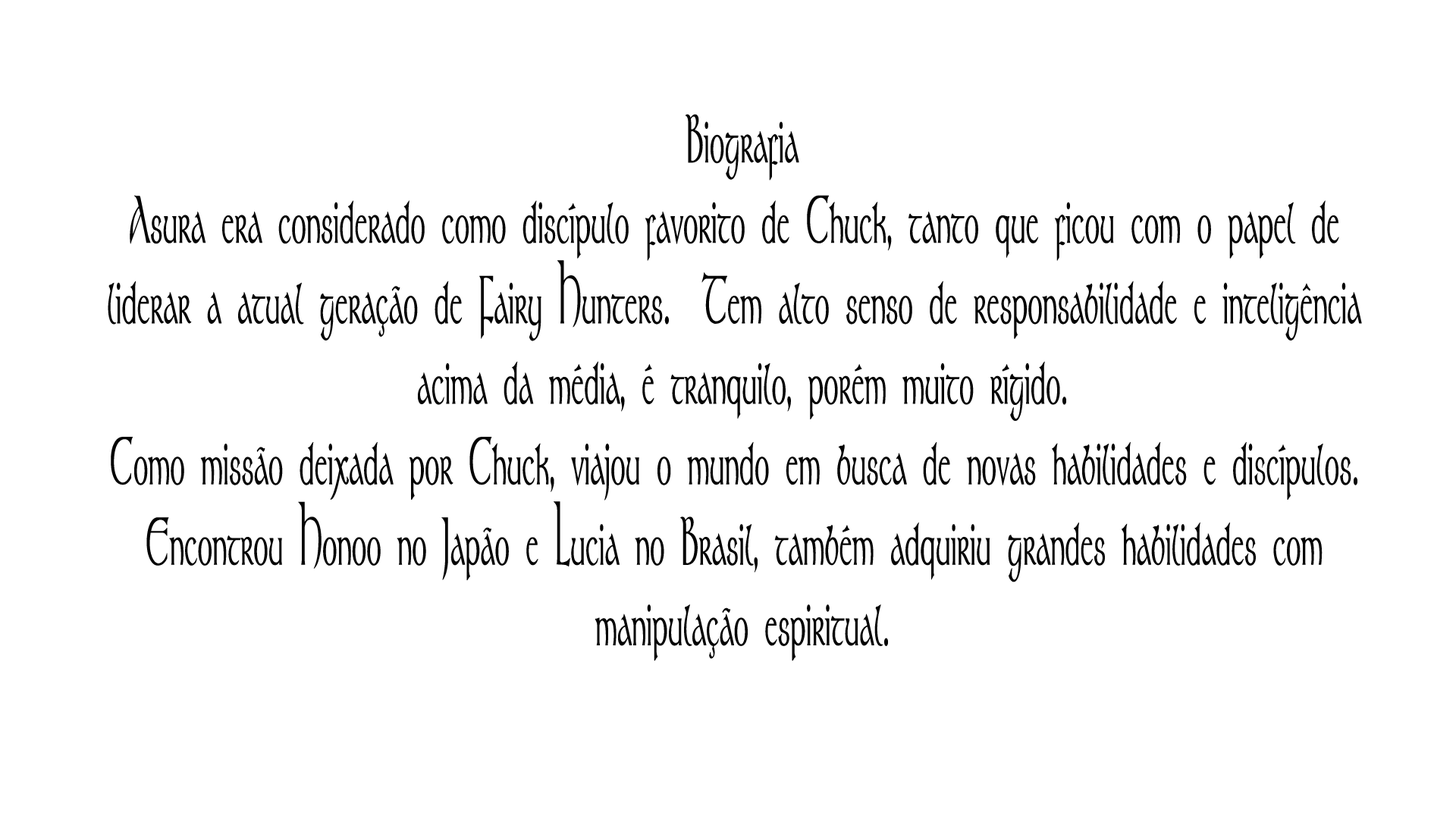
<style>
.page{position:relative;width:1456px;height:819px;background:#ffffff}
.page>*{position:absolute;margin:0}
.t1{font:67.1px "Stonehenge";color:#030303;font-weight:bold;scale:0.45 1}
</style>
<div class="page">
<p class="t1" style="left:108px;top:114px;width:1254px;height:547px;text-align:center">Biografia<br>Asura era considerado como discípulo favorito de Chuck, tanto que ficou com o papel de <br>liderar a atual geração de Fairy Hunters.  Tem alto senso de responsabilidade e inteligência <br>acima da média, é tranquilo, porém muito rígido.<br>Como missão deixada por Chuck, viajou o mundo em busca de novas habilidades e discípulos. <br>Encontrou Honoo no Japão e Lucia no Brasil, também adquiriu grandes habilidades com <br>manipulação espiritual.</p>
</div>
